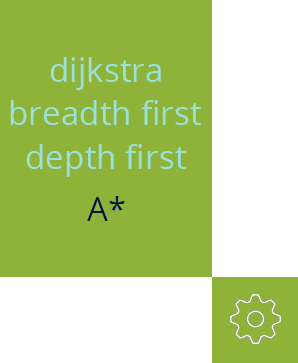
<style>
.page{position:relative;width:298px;height:363px;background:#8fb339}
.page>*{position:absolute;margin:0}
.t1{font:33.3px "OpenSans";color:#99e1d9}
.t2{font:33.3px "OpenSans";color:#011627}
</style>
<div class="page">
<p class="t1" style="left:50px;top:57px;width:111px;height:33px">dijkstra</p>
<p class="t1" style="left:10px;top:100px;width:191px;height:25px">breadth first</p>
<p class="t1" style="left:26px;top:144px;width:160px;height:33px">depth first</p>
<p class="t2" style="left:87px;top:196px;width:38px;height:25px">A*</p>
</div>
